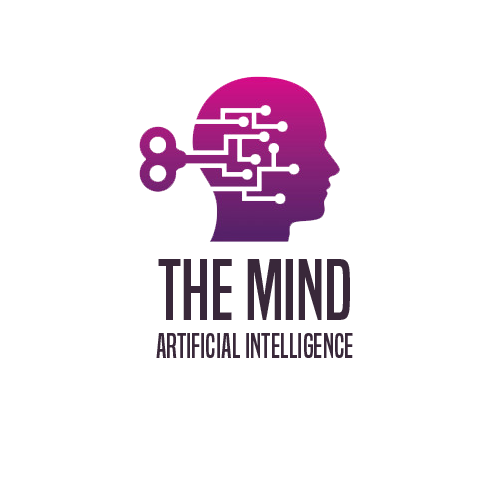
<style>
.page{position:relative;width:500px;height:500px;background:#ffffff}
.page>*{position:absolute;margin:0}
.t1{font:80px "BuiltTitlingRg-Regular";color:#39283a}
.t2{font:32px "BuiltTitlingRg-Regular";color:#39283a}
</style>
<div class="page">
<p class="t1" style="left:158px;top:259px;width:192px;height:61px">THE MIND</p>
<p class="t2" style="left:156px;top:333px;width:197px;height:25px">Artificial intelligence</p>
</div>
